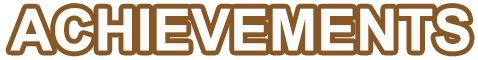
<style>
.page{position:relative;width:478px;height:60px;background:#875826}
.page>*{position:absolute;margin:0}
.t1{font:58px "Arial-BoldMT";color:#ffffff}
</style>
<div class="page">
<p class="t1" style="left:10px;top:8px;width:460px;height:44px">ACHIEVEMENTS</p>
</div>
